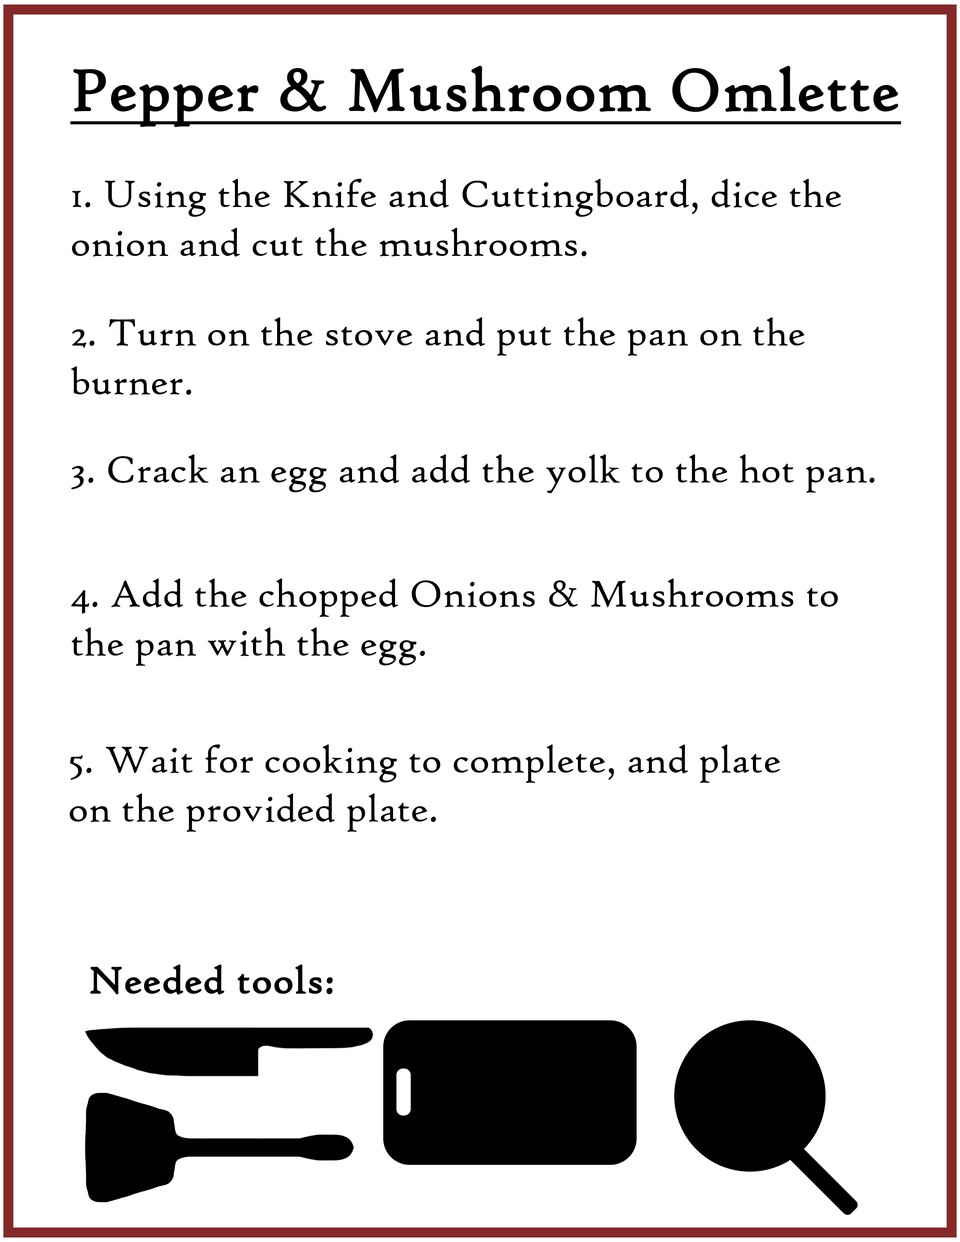
<style>
.page{position:relative;width:960px;height:1242px;background:#ffffff}
.page>*{position:absolute;margin:0}
.t1{font:62.7px "HighTowerText-Reg";color:#000000;font-weight:bold;text-decoration:underline}
.t2{font:40.8px "HighTowerText-Reg";color:#000000}
.t3{font:40.8px "HighTowerText-Reg";color:#000000;font-weight:bold}
</style>
<div class="page">
<p class="t1" style="left:70px;top:65px;width:831px;height:62px">Pepper &amp; Mushroom Omlette</p>
<p class="t2" style="left:72px;top:179px;width:769px;height:78px">1. Using the Knife and Cuttingboard, dice the onion and cut the mushrooms.</p>
<p class="t2" style="left:71px;top:317px;width:733px;height:78px">2. Turn on the stove and put the pan on the burner.</p>
<p class="t2" style="left:71px;top:454px;width:803px;height:40px">3. Crack an egg and add the yolk to the hot pan.</p>
<p class="t2" style="left:71px;top:579px;width:767px;height:87px">4. Add the chopped Onions &amp; Mushrooms to the pan with the egg.</p>
<p class="t2" style="left:70px;top:745px;width:710px;height:87px">5. Wait for cooking to complete, and plate on the provided plate.</p>
<p class="t3" style="left:90px;top:964px;width:243px;height:31px">Needed tools:</p>
</div>
